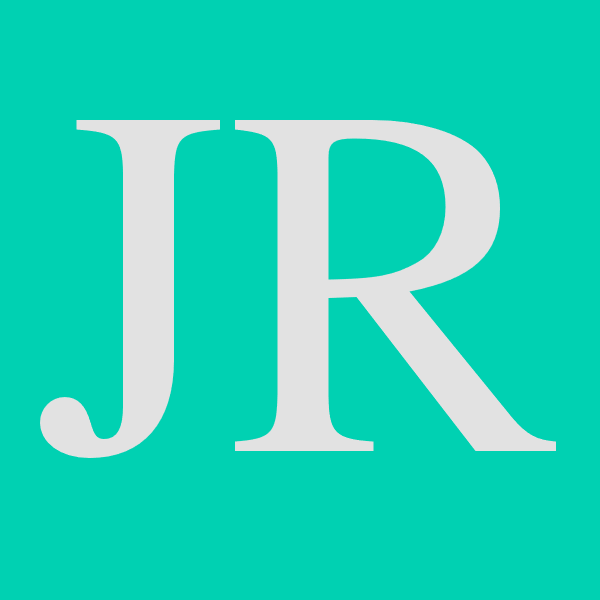
<style>
.page{position:relative;width:600px;height:600px;background:#00d1b2}
.page>*{position:absolute;margin:0}
.t1{font:500px "NimbusRomNo9L-Reg";color:#e2e2e2}
</style>
<div class="page">
<p class="t1" style="left:40px;top:120px;width:516px;height:338px">JR</p>
</div>
